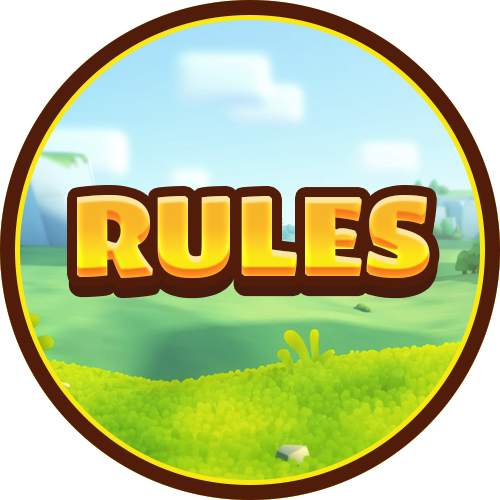
<style>
.page{position:relative;width:500px;height:500px;background:#ffffff}
.page>*{position:absolute;margin:0}
.t1{font:116.4px "AntithesisPro-Bold";letter-spacing:0.01em;text-transform:uppercase}
</style>
<div class="page">
<p class="t1" style="left:77px;top:195px;width:353px;height:84px">rules</p>
</div>
